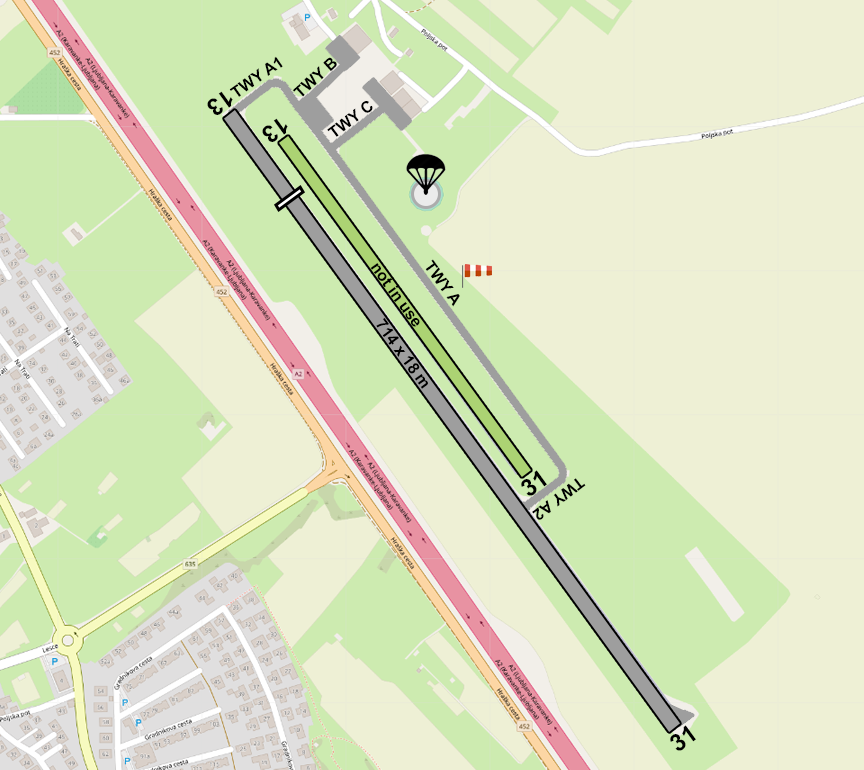
<style>
.page{position:relative;width:864px;height:770px;background:#eef0d5}
.page>*{position:absolute;margin:0}
.t1{font:16px "Arial-BoldMT";color:#000000}
.t2{font:24px "Arial-BoldMT";color:#000000}
</style>
<div class="page">
<p class="t1" style="left:229px;top:56px;width:54px;height:41px;rotate:-35deg">TWY A1</p>
<p class="t1" style="left:292px;top:57px;width:45px;height:40px;rotate:-42deg">TWY B</p>
<p class="t2" style="left:207px;top:91px;width:26px;height:24px;rotate:144deg">13</p>
<p class="t1" style="left:327px;top:101px;width:46px;height:36px;rotate:-37deg">TWY C</p>
<p class="t2" style="left:262px;top:118px;width:26px;height:24px;rotate:144deg">13</p>
<p class="t1" style="left:370px;top:263px;width:50px;height:64px;rotate:54deg">not in use</p>
<p class="t1" style="left:425px;top:259px;width:35px;height:48px;rotate:54deg">TWY A</p>
<p class="t1" style="left:376px;top:317px;width:52px;height:72px;rotate:54deg">714 x 18 m</p>
<p class="t2" style="left:521px;top:470px;width:26px;height:26px;rotate:-36deg">31</p>
<p class="t1" style="left:532px;top:478px;width:54px;height:42px;rotate:143deg">TWY A2</p>
<p class="t2" style="left:670px;top:725px;width:26px;height:26px;rotate:-36deg">31</p>
</div>
